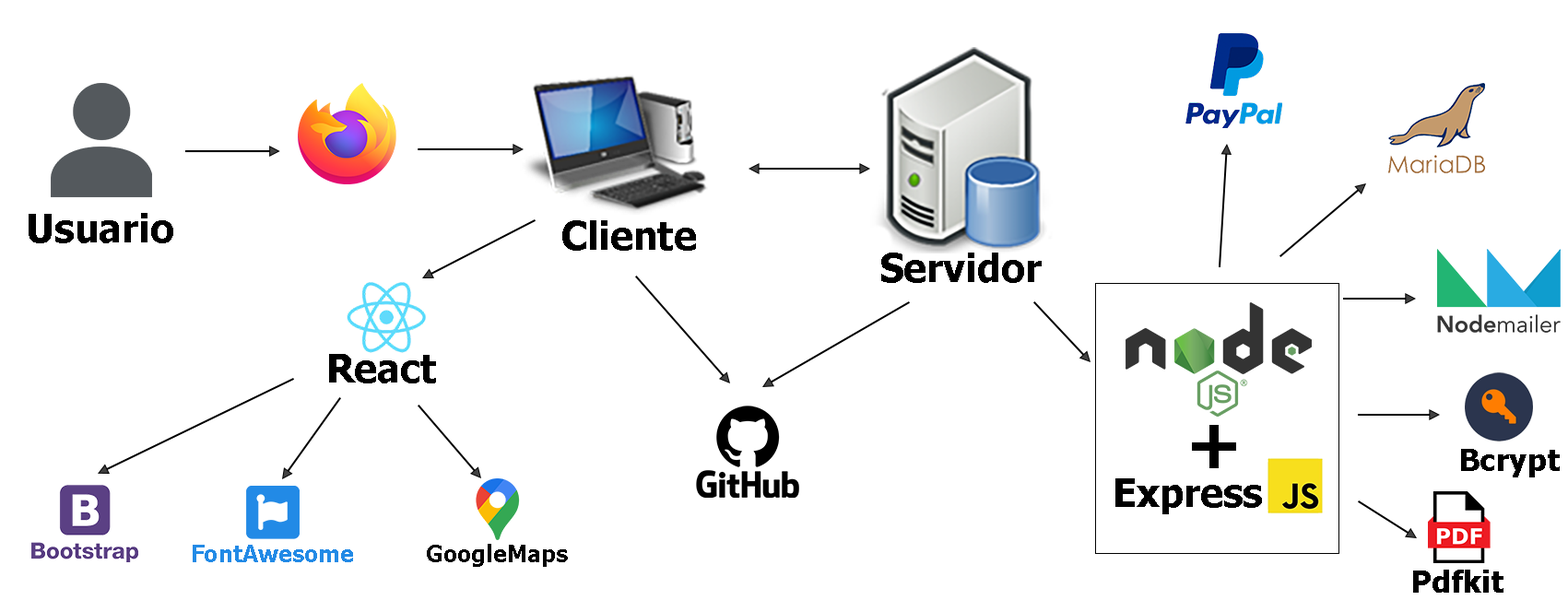
<style>
.page{position:relative;width:1568px;height:612px;background:#ffffff}
.page>*{position:absolute;margin:0}
.t1{font:38.4px "Tahoma-Bold";color:#000000}
.t2{font:69.1px "Tahoma-Bold";color:#000000}
.t3{font:30.7px "Tahoma-Bold";color:#000000}
.t4{font:23px "Tahoma-Bold";color:#228ae6}
.t5{font:23px "Tahoma-Bold";color:#010101}
</style>
<div class="page">
<p class="t1" style="left:29px;top:213px;width:144px;height:30px">Usuario</p>
<p class="t1" style="left:562px;top:220px;width:134px;height:31px">Cliente</p>
<p class="t1" style="left:881px;top:253px;width:161px;height:30px">Servidor</p>
<p class="t1" style="left:329px;top:354px;width:107px;height:29px">React</p>
<p class="t2" style="left:1192px;top:425px;width:44px;height:43px">+</p>
<p class="t3" style="left:1461px;top:449px;width:99px;height:28px">Bcrypt</p>
<p class="t1" style="left:1115px;top:478px;width:147px;height:36px">Express</p>
<p class="t4" style="left:193px;top:545px;width:160px;height:17px">FontAwesome</p>
<p class="t5" style="left:427px;top:544px;width:141px;height:23px">GoogleMaps</p>
<p class="t3" style="left:1413px;top:570px;width:90px;height:23px">Pdfkit</p>
</div>
